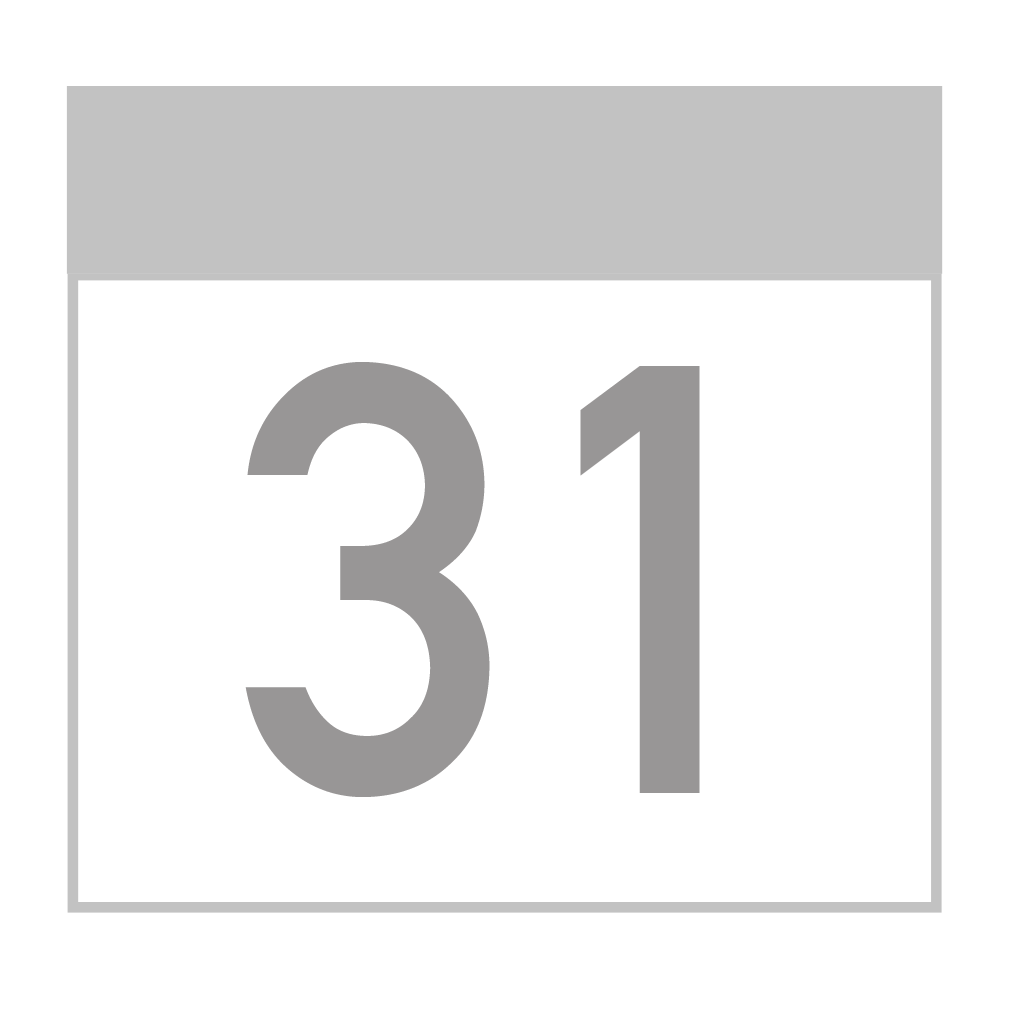
<style>
.page{position:relative;width:1024px;height:1024px;background:#ffffff}
.page>*{position:absolute;margin:0}
.t1{font:600px "DINAlternate-Bold";color:#989696}
</style>
<div class="page">
<p class="t1" style="left:245px;top:362px;width:455px;height:435px">31</p>
</div>
